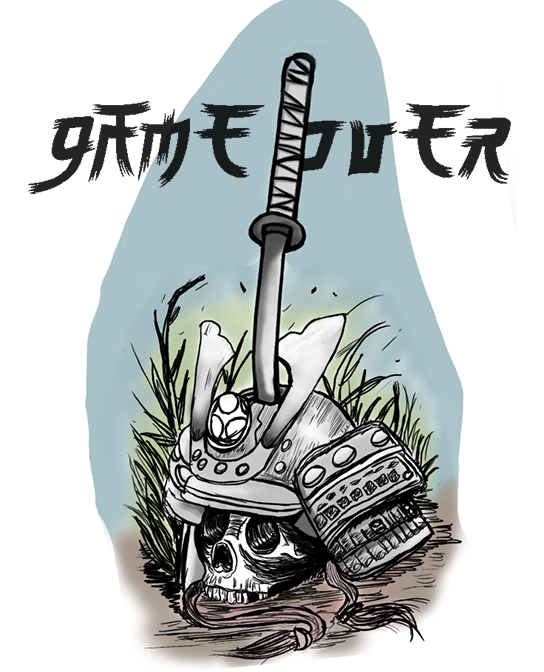
<style>
.page{position:relative;width:544px;height:672px;background:#ffffff}
.page>*{position:absolute;margin:0}
.t1{font:44.4px "MangaStyle";color:#242424}
</style>
<div class="page">
<p class="t1" style="left:28px;top:101px;width:483px;height:93px;text-align:center">GAME OVER</p>
</div>
